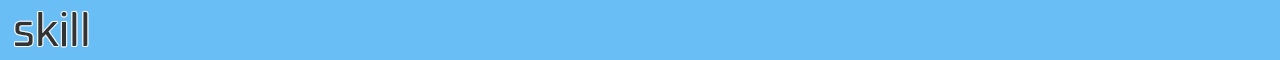
<style>
.page{position:relative;width:1280px;height:60px;background:#69bff5}
.page>*{position:absolute;margin:0}
.t1{font:42.9px "wamakeprice-regular";color:#333333}
</style>
<div class="page">
<p class="t1" style="left:15px;top:12px;width:73px;height:35px">skill</p>
</div>
